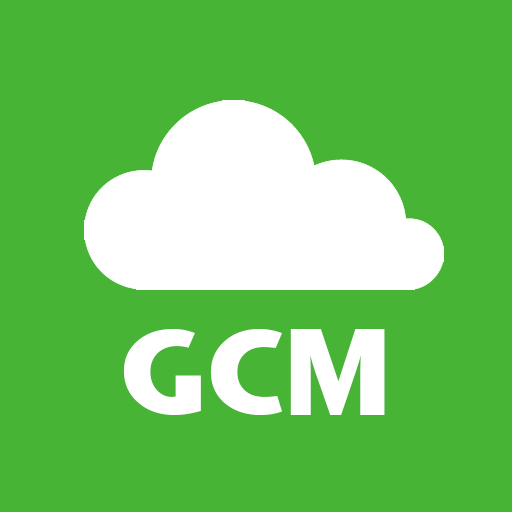
<style>
.page{position:relative;width:512px;height:512px;background:#48b436}
.page>*{position:absolute;margin:0}
.t1{font:120px "StoneSansOSITCTTBold";letter-spacing:-0.025em;color:#ffffff}
</style>
<div class="page">
<p class="t1" style="left:123px;top:329px;width:262px;height:86px">GCM</p>
</div>
